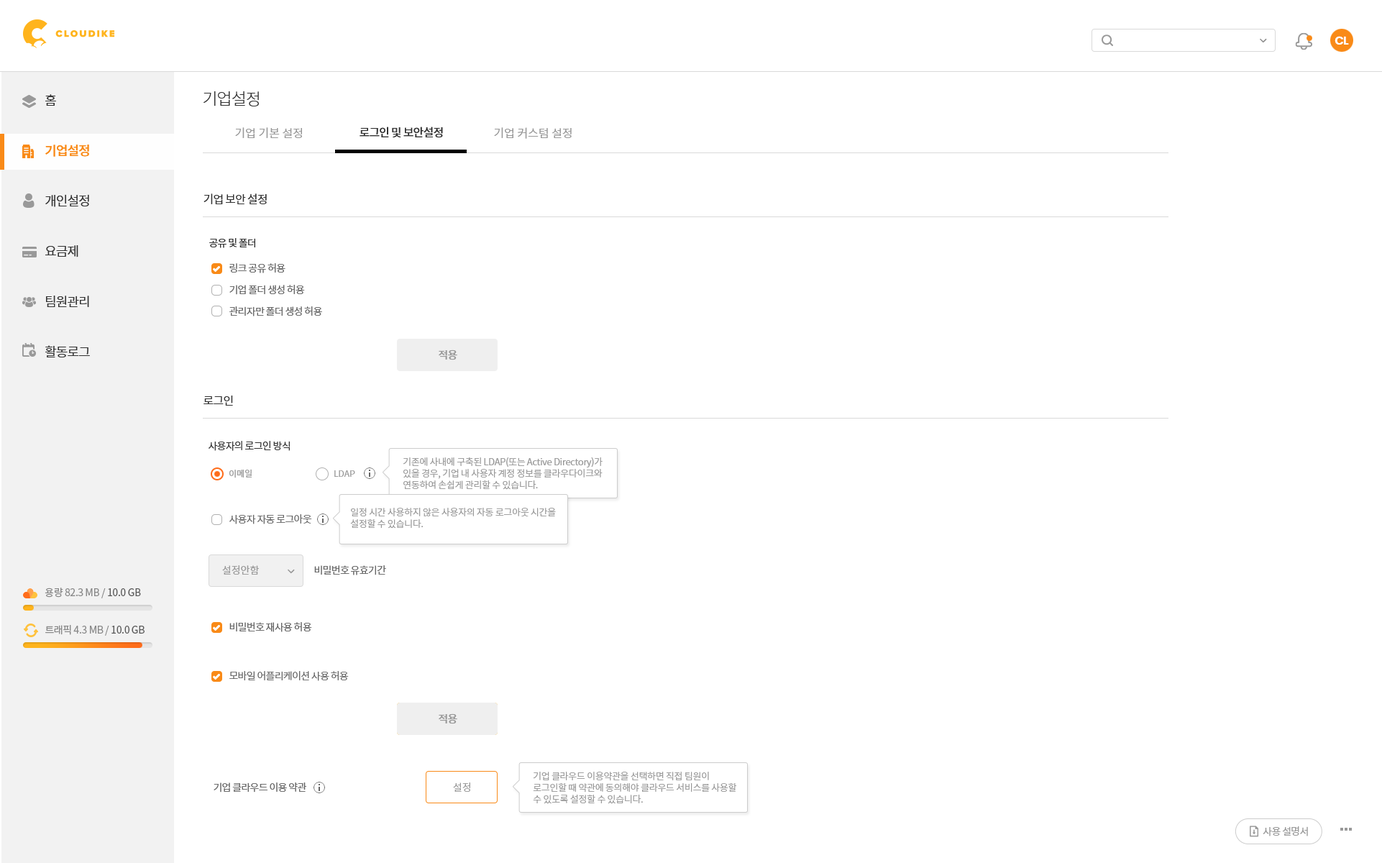
<style>
.page{position:relative;width:1382px;height:863px;background:#ffffff}
.page>*{position:absolute;margin:0}
.t1{font:11.5px "Poppins-SemiBold";letter-spacing:-0.05em;color:#ffffff}
.t2{font:12.9px/50.3px "NotoSansCJKkr-DemiLight";letter-spacing:-0.05em;color:#333333}
.t3{font:12.9px/50.3px "NotoSansCJKkr-Medium";letter-spacing:-0.05em;color:#f98a17}
.t4{font:16.5px "NotoSansCJKkr-Light";letter-spacing:-0.05em;color:#333333}
.t5{font:11.5px "NotoSansCJKkr-DemiLight";color:#999999}
.t6{font:11.5px "NotoSansCJKkr-Medium";letter-spacing:-0.05em;color:#333333}
.t7{font:11.5px "NotoSansCJKkr-Regular";letter-spacing:-0.05em;color:#333333}
.t8{font:10.1px "NotoSansCJKkr-Regular";letter-spacing:-0.05em;color:#333333}
.t9{font:10.1px/21.6px "NotoSansCJKkr-DemiLight";letter-spacing:-0.05em;color:#666666}
.t10{font:10.8px "NotoSansCJKkr-Medium";letter-spacing:-0.05em;color:#999999}
.t11{font:9.3px/11.5px "NotoSansCJKkr-DemiLight";letter-spacing:-0.025em;color:#999999}
.t12{font:8.6px "NotoSansCJKkr-DemiLight";color:#999999}
.t13{font:10.1px "NotoSansCJKkr-DemiLight";letter-spacing:-0.05em;color:#666666}
.t14{font:10.1px "NotoSansCJKkr-DemiLight";color:#999999}
.t15{font:10.1px "NotoSansCJKkr-Regular";letter-spacing:-0.025em;color:#888888}
.t16{font:10.1px "NotoSansCJKkr-Regular";letter-spacing:-0.025em;color:#585858}
.t17{font:10.1px "NotoSansCJKkr-Regular";letter-spacing:-0.05em;color:#999999}
</style>
<div class="page">
<p class="t1" style="left:1335px;top:36px;width:14px;height:9px">CL</p>
<p class="t2" style="left:45px;top:94px;width:45px;height:263px">홈<br><span class="t3">기업설정<br></span>개인설정<br>요금제<br>팀원관리<br>활동로그</p>
<p class="t4" style="left:203px;top:91px;width:56px;height:15px">기업설정</p>
<p class="t5" style="left:235px;top:127px;width:67px;height:11px">기업 기본 설정</p>
<p class="t6" style="left:360px;top:127px;width:83px;height:11px">로그인 및 보안설정</p>
<p class="t5" style="left:494px;top:127px;width:78px;height:12px">기업 커스텀 설정</p>
<p class="t7" style="left:203px;top:193px;width:64px;height:11px">기업 보안 설정</p>
<p class="t8" style="left:209px;top:238px;width:46px;height:10px">공유 및 폴더</p>
<p class="t9" style="left:229px;top:263px;width:93px;height:53px">링크 공유 허용<br>기업 폴더 생성 허용<br>관리자만 폴더 생성 허용</p>
<p class="t10" style="left:439px;top:349px;width:18px;height:11px">적용</p>
<p class="t7" style="left:203px;top:395px;width:30px;height:11px">로그인</p>
<p class="t8" style="left:209px;top:441px;width:81px;height:10px">사용자의 로그인 방식</p>
<p class="t11" style="left:403px;top:457px;width:200px;height:33px">기존에 사내에 구축된 LDAP(또는 Active Directory)가 <br>있을 경우, 기업 내 사용자 계정 정보를 클라우다이크와 <br>연동하여 손쉽게 관리할 수 있습니다.</p>
<p class="t12" style="left:229px;top:469px;width:23px;height:9px">이메일</p>
<p class="t12" style="left:334px;top:470px;width:21px;height:7px">LDAP</p>
<p class="t11" style="left:350px;top:508px;width:206px;height:20px">일정 시간 사용하지 않은 사용자의 자동 로그아웃 시간을 <br>설정할 수 있습니다.</p>
<p class="t13" style="left:229px;top:514px;width:83px;height:10px">사용자 자동 로그아웃</p>
<p class="t14" style="left:222px;top:565px;width:37px;height:10px">설정안함</p>
<p class="t13" style="left:314px;top:565px;width:72px;height:10px">비밀번호 유효기간</p>
<p class="t15" style="left:45px;top:587px;width:96px;height:11px">용량 82.3 MB / <span class="t16">10.0 GB</span></p>
<p class="t15" style="left:45px;top:625px;width:100px;height:11px">트래픽 4.3 MB / <span class="t16">10.0 GB</span></p>
<p class="t13" style="left:229px;top:622px;width:83px;height:10px">비밀번호 재사용 허용</p>
<p class="t13" style="left:229px;top:671px;width:120px;height:10px">모바일 어플리케이션 사용 허용</p>
<p class="t10" style="left:439px;top:713px;width:18px;height:11px">적용</p>
<p class="t10" style="left:439px;top:713px;width:18px;height:11px">적용</p>
<p class="t11" style="left:533px;top:772px;width:203px;height:32px">기업 클라우드 이용약관을 선택하면 직접 팀원이 <br>로그인할 때 약관에 동의해야 클라우드 서비스를 사용할 <br>수 있도록 설정할 수 있습니다.</p>
<p class="t13" style="left:214px;top:782px;width:92px;height:10px">기업 클라우드 이용 약관</p>
<p class="t14" style="left:453px;top:782px;width:17px;height:10px">설정</p>
<p class="t17" style="left:1263px;top:826px;width:45px;height:10px">사용 설명서</p>
</div>
